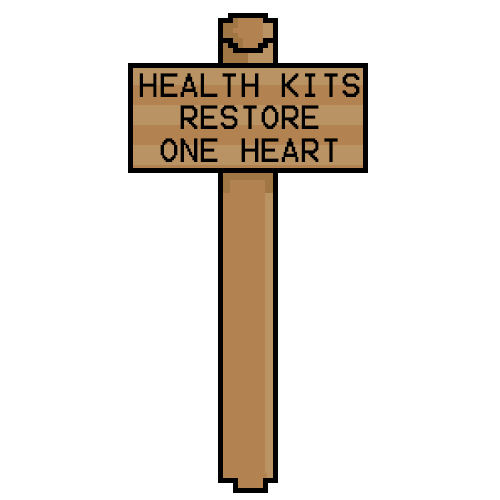
<style>
.page{position:relative;width:500px;height:500px;background:#ffffff}
.page>*{position:absolute;margin:0}
.t1{font:27px "Terminal";color:#000000}
</style>
<div class="page">
<p class="t1" style="left:139px;top:73px;width:221px;height:89px;text-align:center">HEALTH KITS<br>RESTORE<br>ONE HEART</p>
</div>
